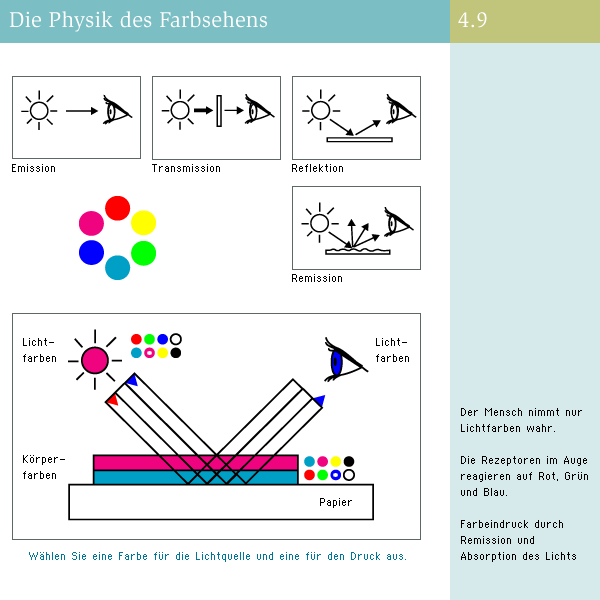
<style>
.page{position:relative;width:600px;height:600px;background:#ffffff}
.page>*{position:absolute;margin:0}
.t1{font:22px "Slimbach-Book";letter-spacing:0.01em;color:#ffffff}
.t2{font:22px "Slimbach-Book";color:#ffffff}
.t3{font:10px "Supertext02";color:#000000}
.t4{font:10px/16px "Supertext02";color:#000000}
.t5{font:10px "Supertext02";color:#007799}
</style>
<div class="page">
<p class="t1" style="left:9px;top:11px;width:258px;height:21px">Die Physik des Farbsehens</p>
<p class="t2" style="left:458px;top:12px;width:29px;height:16px">4.9</p>
<p class="t3" style="left:12px;top:164px;width:43px;height:8px">Emission</p>
<p class="t3" style="left:152px;top:164px;width:68px;height:8px">Transmission</p>
<p class="t3" style="left:292px;top:164px;width:51px;height:8px">Reflektion</p>
<p class="t3" style="left:292px;top:274px;width:50px;height:8px">Remission</p>
<p class="t4" style="left:23px;top:338px;width:33px;height:24px">Licht-<br>farben</p>
<p class="t4" style="left:376px;top:338px;width:33px;height:24px">Licht-<br>farben</p>
<p class="t4" style="left:461px;top:408px;width:127px;height:154px">Der Mensch nimmt nur <br>Lichtfarben wahr.<br><br>Die Rezeptoren im Auge <br>reagieren auf Rot, Grün <br>und Blau.<br><br>Farbeindruck durch <br>Remission und <br>Absorption des Lichts</p>
<p class="t4" style="left:23px;top:455px;width:42px;height:24px">Körper-<br>farben</p>
<p class="t3" style="left:320px;top:498px;width:32px;height:10px">Papier</p>
<p class="t5" style="left:29px;top:552px;width:377px;height:10px">Wählen Sie eine Farbe für die Lichtquelle und eine für den Druck aus.</p>
</div>
